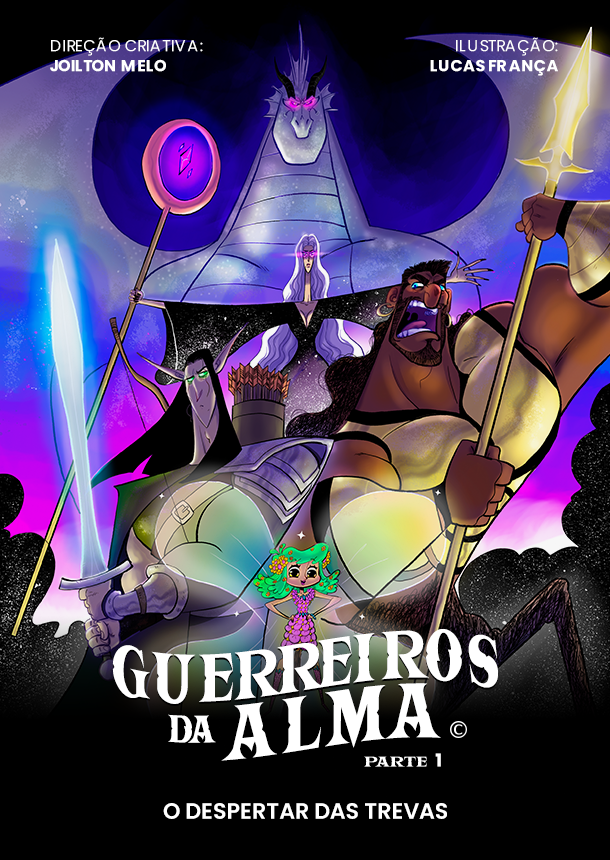
<style>
.page{position:relative;width:610px;height:860px;background:#000000}
.page>*{position:absolute;margin:0}
.t1{font:16px/20px "Poppins-Regular";color:#ffffff;text-transform:uppercase}
.t2{font:16px/20px "Poppins-Bold";color:#ffffff;text-transform:uppercase}
.t3{font:76.3px/59.7px "KIDCOOLDRAGON";color:#ffffff;text-transform:uppercase;scale:0.67 1}
.t4{font:76.3px/59.7px "KIDCOOLDRAGON";letter-spacing:-0.05em;color:#ffffff;text-transform:uppercase;scale:0.67 1}
.t5{font:40.1px/59.7px "KIDCOOLDRAGON";color:#ffffff;text-transform:uppercase;scale:0.67 1}
.t6{font:88.1px/59.7px "KIDCOOLDRAGON";color:#ffffff;text-transform:uppercase;scale:0.67 1}
.t7{font:15.4px "KIDCOOLDRAGON";color:#ffffff}
.t8{font:17.7px "Poppins-Bold";color:#ffffff}
.t9{font:22.2px "Poppins-SemiBold";color:#ffffff;text-transform:uppercase}
</style>
<div class="page">
<p class="t1" style="left:50px;top:37px;width:153px;height:35px">direção Criativa:<br><span class="t2">Joilton Melo</span></p>
<p class="t2" style="left:430px;top:37px;width:128px;height:39px;text-align:right"><span class="t1">Ilustração:<br></span>Lucas França</p>
<p class="t3" style="left:112px;top:629px;width:386px;height:132px;text-align:center"><span class="t4">Gu</span>er<span class="t4">r</span>eiros<br><span class="t5">da </span><span class="t6">Alma</span></p>
<p class="t7" style="left:364px;top:753px;width:77px;height:14px">Parte <span class="t8">1</span></p>
<p class="t9" style="left:163px;top:803px;width:284px;height:16px">O Despertar das Trevas</p>
</div>
